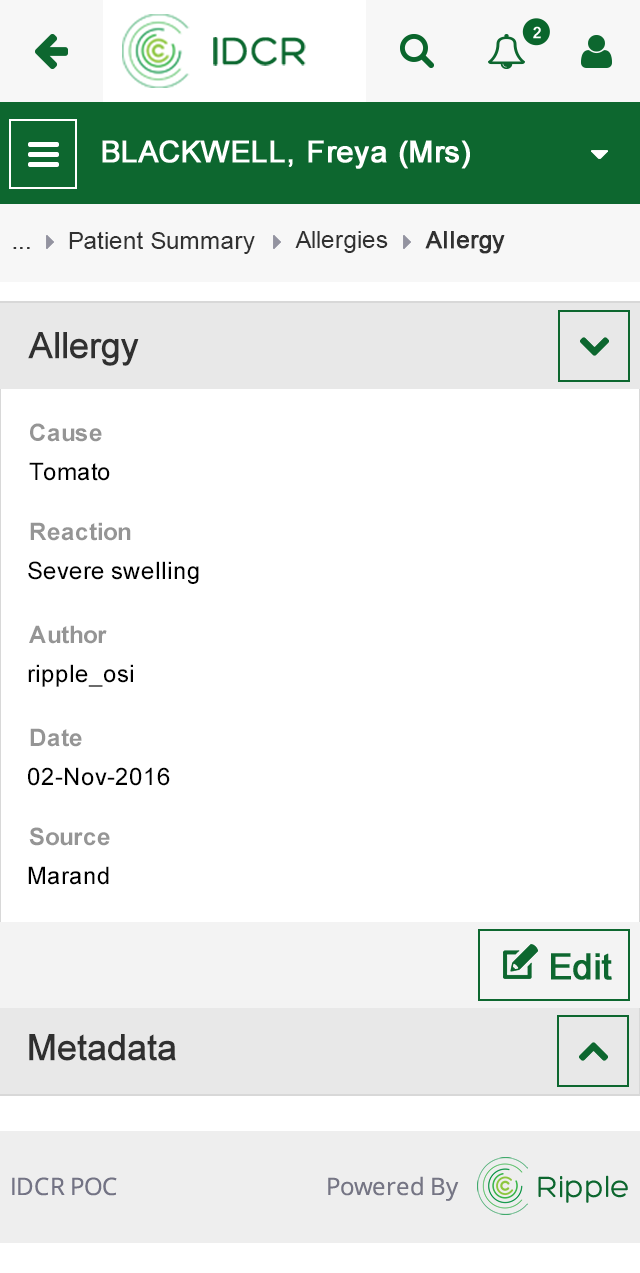
<style>
.page{position:relative;width:640px;height:1273px;background:#ffffff}
.page>*{position:absolute;margin:0}
.t1{font:24px "ArialMT";color:#313131}
.t2{font:24px "ArialMT";color:#313131;font-weight:bold}
.t3{font:36px "ArialMT";color:#303030;font-weight:bold}
.t4{font:24px "Arial-BoldMT";color:#959595}
.t5{font:24px "ArialMT";color:#000000}
</style>
<div class="page">
<p class="t1" style="left:69px;top:231px;width:186px;height:23px">Patient Summary</p>
<p class="t1" style="left:295px;top:231px;width:93px;height:22px">Allergies</p>
<p class="t2" style="left:425px;top:231px;width:80px;height:23px">Allergy</p>
<p class="t1" style="left:13px;top:247px;width:17px;height:2px">...</p>
<p class="t3" style="left:28px;top:332px;width:111px;height:34px">Allergy</p>
<p class="t4" style="left:30px;top:423px;width:72px;height:19px">Cause</p>
<p class="t5" style="left:29px;top:462px;width:81px;height:19px">Tomato</p>
<p class="t4" style="left:30px;top:522px;width:101px;height:19px">Reaction</p>
<p class="t5" style="left:28px;top:561px;width:171px;height:23px">Severe swelling</p>
<p class="t4" style="left:29px;top:625px;width:78px;height:19px">Author</p>
<p class="t5" style="left:28px;top:664px;width:105px;height:23px">ripple_osi</p>
<p class="t4" style="left:30px;top:728px;width:52px;height:19px">Date</p>
<p class="t5" style="left:28px;top:767px;width:142px;height:19px">02-Nov-2016</p>
<p class="t4" style="left:29px;top:827px;width:81px;height:19px">Source</p>
<p class="t5" style="left:28px;top:866px;width:81px;height:19px">Marand</p>
<p class="t3" style="left:29px;top:1034px;width:147px;height:27px">Metadata</p>
</div>
